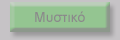
<style>
.page{position:relative;width:120px;height:40px;background:#94c591}
.page>*{position:absolute;margin:0}
.t1{font:14px "ArialMT";color:#8b898b}
</style>
<div class="page">
<p class="t1" style="left:35px;top:11px;width:50px;height:11px">Μυστικό</p>
</div>
